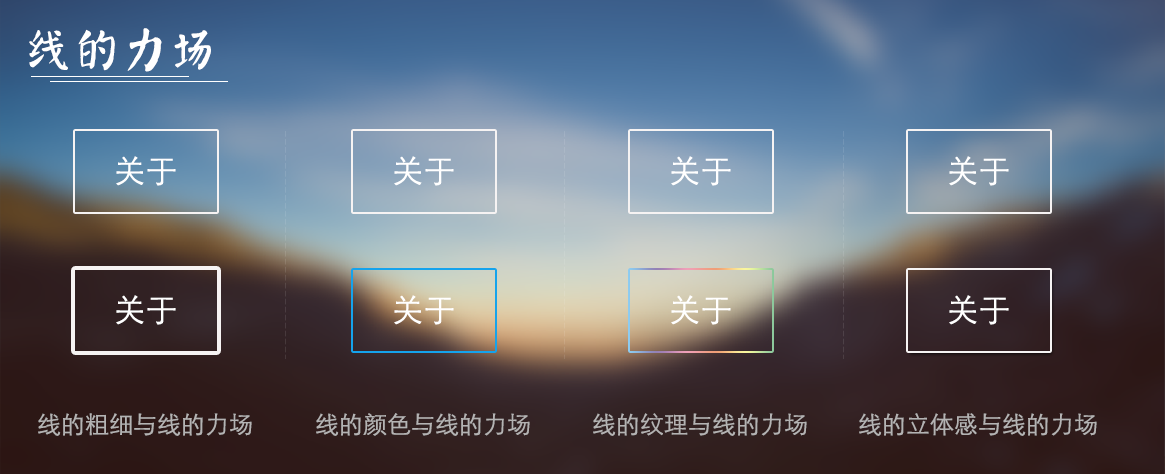
<style>
.page{position:relative;width:1165px;height:474px}
.page>*{position:absolute;margin:0}
.t1{font:48px "øów·»îów©I";color:#ffffff}
.t2{font:32px "STXihei";color:#ffffff}
.t3{font:24px "STXihei";color:#b4b3b3}
</style>
<div class="page">
<p class="t1" style="left:29px;top:28px;width:182px;height:44px">线的力场</p>
<p class="t2" style="left:116px;top:156px;width:60px;height:30px">关于</p>
<p class="t2" style="left:394px;top:156px;width:60px;height:30px">关于</p>
<p class="t2" style="left:671px;top:156px;width:60px;height:30px">关于</p>
<p class="t2" style="left:949px;top:156px;width:60px;height:30px">关于</p>
<p class="t2" style="left:116px;top:295px;width:60px;height:30px">关于</p>
<p class="t2" style="left:394px;top:295px;width:60px;height:30px">关于</p>
<p class="t2" style="left:671px;top:295px;width:60px;height:30px">关于</p>
<p class="t2" style="left:949px;top:295px;width:60px;height:30px">关于</p>
<p class="t3" style="left:38px;top:413px;width:214px;height:23px">线的粗细与线的力场</p>
<p class="t3" style="left:316px;top:413px;width:214px;height:23px">线的颜色与线的力场</p>
<p class="t3" style="left:593px;top:413px;width:214px;height:23px">线的纹理与线的力场</p>
<p class="t3" style="left:859px;top:413px;width:238px;height:23px">线的立体感与线的力场</p>
</div>
